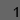
<style>
.page{position:relative;width:20px;height:20px;background:#666666}
.page>*{position:absolute;margin:0}
.t1{font:14px "ArialMT";color:#000000}
</style>
<div class="page">
<p class="t1" style="left:13px;top:7px;width:5px;height:10px">1</p>
</div>
